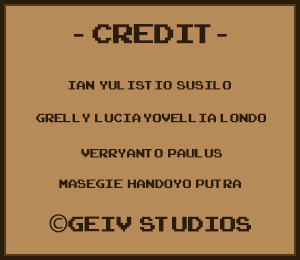
<style>
.page{position:relative;width:300px;height:260px;background:#b78b59}
.page>*{position:absolute;margin:0}
.t1{font:37.5px "ArcadeClassic";color:#2c1c0b}
.t2{font:37.5px "MyriadPro-Regular";color:#2c1c0b}
.t3{font:16.7px "ArcadeClassic";color:#2c1c0b}
.t4{font:29.2px "ArcadeClassic";color:#2c1c0b}
.t5{font:29.2px "MyriadPro-Regular";color:#2c1c0b}
</style>
<div class="page">
<p class="t1" style="left:74px;top:24px;width:153px;height:20px"><span class="t2">- </span>CREDIT<span class="t2">-</span></p>
<p class="t3" style="left:68px;top:81px;width:163px;height:9px">Ian  yulistio  Susilo</p>
<p class="t3" style="left:36px;top:113px;width:230px;height:10px">grelly  lucia yovellia  londo</p>
<p class="t3" style="left:81px;top:149px;width:141px;height:9px">verryanto  paulus</p>
<p class="t3" style="left:59px;top:179px;width:182px;height:9px">masegie  handoyo  putra</p>
<p class="t4" style="left:49px;top:214px;width:202px;height:19px"><span class="t5">©</span>GEIV  STUDIOS</p>
</div>
